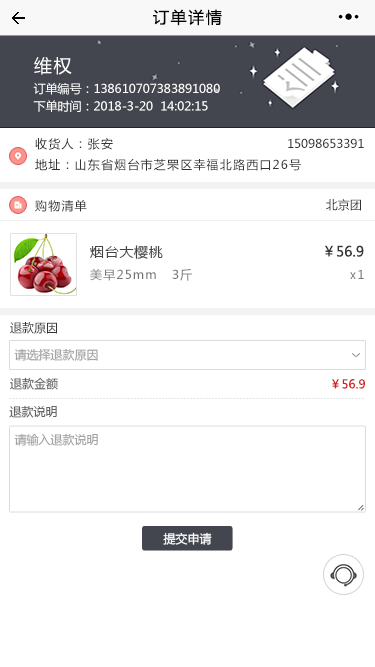
<style>
.page{position:relative;width:375px;height:667px;background:#ffffff}
.page>*{position:absolute;margin:0}
.t1{font:16px "MicrosoftYaHei";letter-spacing:0.1em;color:#020202}
.t2{font:18px "MicrosoftYaHei";letter-spacing:0.1em;color:#ffffff}
.t3{font:12px "MicrosoftYaHei";color:#fffefe}
.t4{font:12px "MicrosoftYaHei";color:#ffffff}
.t5{font:12px "MicrosoftYaHei";letter-spacing:0.1em;color:#333333}
.t6{font:12px "MicrosoftYaHei";color:#333333}
.t7{font:14px "MicrosoftYaHei";letter-spacing:0.05em;color:#454545}
.t8{font:14px "MicrosoftYaHei";color:#363636}
.t9{font:12px "MicrosoftYaHei";letter-spacing:0.1em;color:#747474}
.t10{font:12px "MicrosoftYaHei";color:#a5a4a4}
.t11{font:12px "MicrosoftYaHei";color:#646464}
.t12{font:12px "MicrosoftYaHei";color:#d51d1d}
</style>
<div class="page">
<p class="t1" style="left:153px;top:9px;width:69px;height:17px">订单详情</p>
<p class="t2" style="left:34px;top:57px;width:38px;height:18px">维权</p>
<p class="t3" style="left:33px;top:82px;width:187px;height:13px">订单编号：138610707383891080</p>
<p class="t4" style="left:33px;top:100px;width:175px;height:12px">下单时间：2018-3-20  14:02:15</p>
<p class="t5" style="left:35px;top:138px;width:78px;height:12px">收货人：张安</p>
<p class="t6" style="left:288px;top:138px;width:76px;height:10px">15098653391</p>
<p class="t5" style="left:35px;top:158px;width:266px;height:13px">地址：山东省烟台市芝罘区幸福北路西口26号</p>
<p class="t5" style="left:35px;top:199px;width:52px;height:13px">购物清单</p>
<p class="t6" style="left:326px;top:199px;width:35px;height:12px">北京团</p>
<p class="t7" style="left:90px;top:245px;width:73px;height:14px">烟台大樱桃</p>
<p class="t8" style="left:325px;top:245px;width:39px;height:12px">￥56.9</p>
<p class="t9" style="left:90px;top:269px;width:102px;height:12px">美早25mm   3斤</p>
<p class="t9" style="left:350px;top:269px;width:14px;height:10px">x1</p>
<p class="t6" style="left:10px;top:322px;width:47px;height:12px">退款原因</p>
<p class="t10" style="left:14px;top:348px;width:84px;height:13px">请选择退款原因</p>
<p class="t11" style="left:10px;top:377px;width:48px;height:13px">退款金额</p>
<p class="t12" style="left:332px;top:379px;width:33px;height:10px">￥56.9</p>
<p class="t11" style="left:9px;top:405px;width:48px;height:13px">退款说明</p>
<p class="t10" style="left:14px;top:433px;width:84px;height:13px">请输入退款说明</p>
<p class="t4" style="left:163px;top:532px;width:49px;height:13px">提交申请</p>
</div>
